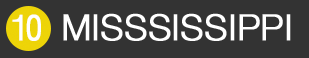
<style>
.page{position:relative;width:309px;height:58px;background:#333333}
.page>*{position:absolute;margin:0}
.t1{font:36px "HelveticaNeue-Light";color:#ffffff;font-weight:bold}
.t2{font:36px "HelveticaNeue-Light";letter-spacing:-0.12em;color:#ffffff;font-weight:bold}
.t3{font:36px "HelveticaNeue";letter-spacing:-0.12em;color:#ffffff;font-weight:bold;scale:0.8 1}
</style>
<div class="page">
<p class="t1" style="left:12px;top:13px;width:279px;height:28px"><span class="t2">1</span><span class="t3">0</span>  MISSSISSIPPI</p>
</div>
